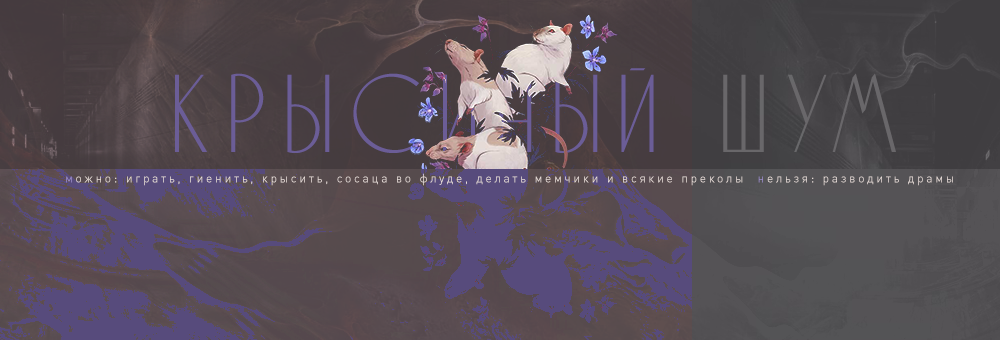
<style>
.page{position:relative;width:1000px;height:340px}
.page>*{position:absolute;margin:0}
.t1{font:111px "SverdlovskRegular";letter-spacing:0.18em;color:#6b5d97}
.t2{font:12px "DINPro";letter-spacing:0.22em;color:#e6dbd7}
.t3{font:12px "DINPro";letter-spacing:0.22em;color:#9c8dcb}
.t4{font:12px "DINPro";letter-spacing:0.22em;color:#e4d9d5}
</style>
<div class="page">
<p class="t1" style="left:175px;top:68px;width:721px;height:85px">крысиный шум</p>
<p class="t2" style="left:66px;top:173px;width:887px;height:13px"><span class="t3">м</span>ожно: играть, гиенить, крысить, сосаца во флуде, делать мемчики и всякие преколы  <span class="t3">н</span><span class="t4">ельзя: разводить драмы</span></p>
</div>
